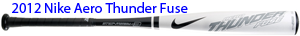
<style>
.page{position:relative;width:300px;height:36px;background:#ffffff}
.page>*{position:absolute;margin:0}
.t1{font:14.4px "MyriadPro-Regular";color:#0000ff}
</style>
<div class="page">
<p class="t1" style="left:12px;top:2px;width:176px;height:11px">2012 Nike Aero Thunder Fuse</p>
</div>
